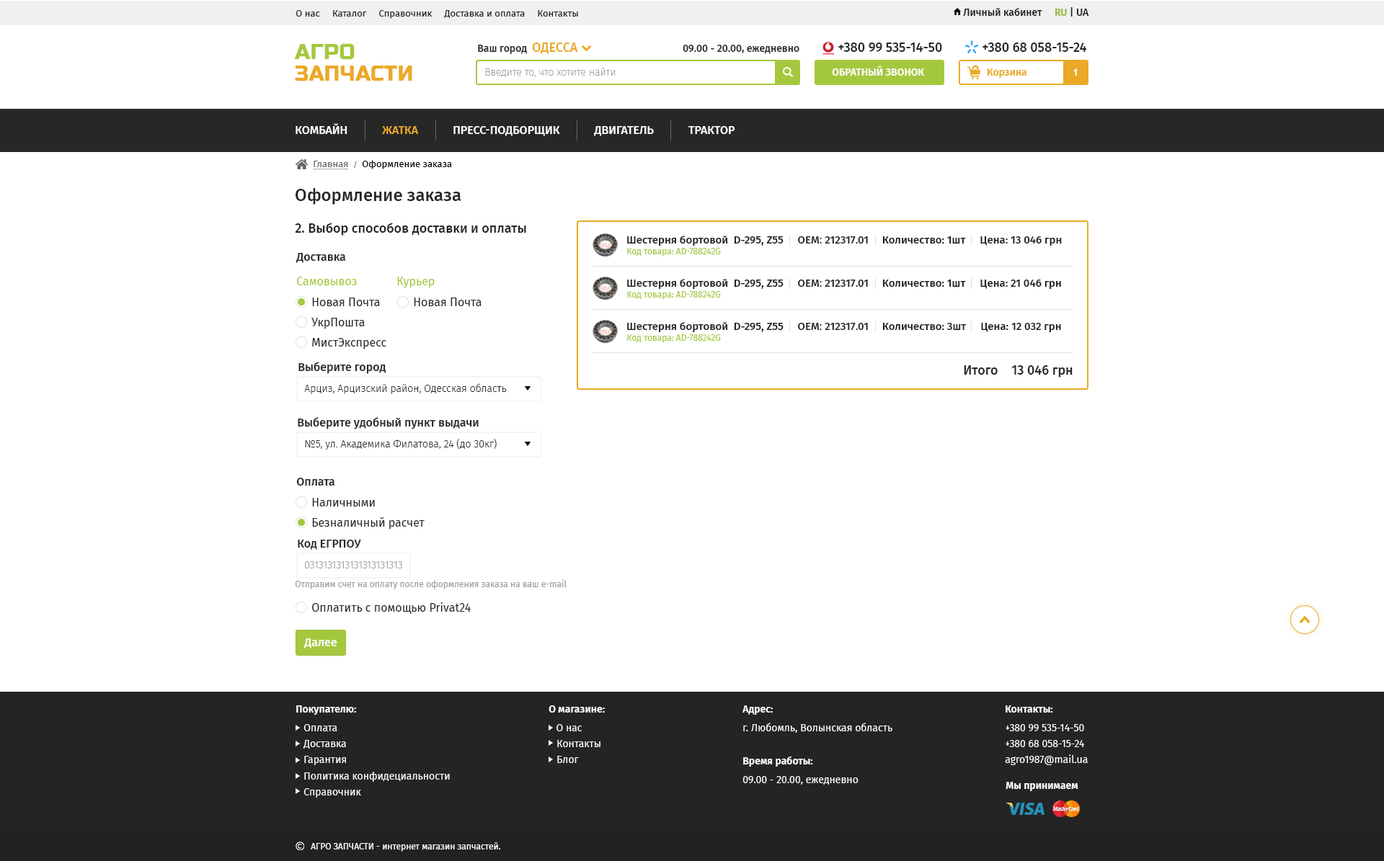
<style>
.page{position:relative;width:1384px;height:861px;background:#ffffff}
.page>*{position:absolute;margin:0}
.t1{font:9.4px "FiraSans-Regular";color:#212121}
.t2{font:10.1px "FiraSans-Medium";color:#212121}
.t3{font:10.1px "FiraSans-Medium";color:#91b627}
.t4{font:21.6px/21.6px "RussoOne-Regular";color:#eaa926;text-transform:uppercase}
.t5{font:21.6px/21.6px "RussoOne-Regular";color:#a4c83d;text-transform:uppercase}
.t6{font:10.1px "FiraSans-Medium";color:#272727}
.t7{font:13px "FiraSans-Medium";color:#eaa926}
.t8{font:13px "FiraSans-Medium";color:#272727}
.t9{font:10.1px "FiraSans-SemiBold";color:#ffffff;text-transform:uppercase}
.t10{font:10.1px "FiraSans-Thin";color:#777777}
.t11{font:10.1px "FiraSans-SemiBold";color:#eaa926}
.t12{font:10.1px "HelveticaNeueCyr-Bold";color:#ffffff}
.t13{font:11.5px "FiraSans-Medium";color:#ffffff;text-transform:uppercase}
.t14{font:11.5px "FiraSans-Medium";color:#eaa926;text-transform:uppercase}
.t15{font:9.4px "FiraSans-Regular";color:#000000}
.t16{font:9.4px "FiraSans-Regular";color:#676767;text-decoration:underline}
.t17{font:7.2px "FiraSans-Regular";color:#676767}
.t18{font:17.3px "FiraSans-Medium";color:#272727}
.t19{font:10.8px "FiraSans-Medium";color:#212121}
.t20{font:10.8px "FiraSans-Medium";color:#272727}
.t21{font:10.8px "FiraSans-Regular";color:#272727}
.t22{font:11.5px "FiraSans-Medium";color:#272727}
.t23{font:8.7px "FiraSans-Regular";color:#a4c83d}
.t24{font:11.5px "FiraSans-Regular";color:#a4c83d}
.t25{font:11.5px "FiraSans-Regular";color:#272727}
.t26{font:10.1px "FiraSans-Light";color:#272727}
.t27{font:10.1px "FiraSans-Light";color:#9e9e9e}
.t28{font:8.7px "FiraSans-Regular";color:#9e9e9e}
.t29{font:11.5px "FiraSans-Medium";color:#ffffff}
.t30{font:10.1px/15.9px "FiraSans-Regular";color:#ffffff}
.t31{font:10.1px/18.7px "FiraSans-SemiBold";color:#ffffff}
.t32{font:10.1px/18.7px "FiraSans-Regular";color:#ffffff}
.t33{font:10.1px "FiraSans-SemiBold";color:#ffffff}
.t34{font:8.7px "FiraSans-Regular";color:#ffffff}
</style>
<div class="page">
<p class="t1" style="left:296px;top:10px;width:282px;height:9px">О нас     Каталог     Справочник     Доставка и оплата     Контакты</p>
<p class="t2" style="left:963px;top:7px;width:126px;height:10px">Личный кабинет     <span class="t3">RU</span> | UA</p>
<p class="t4" style="left:294px;top:43px;width:118px;height:38px"><span class="t5">АГРО<br></span>ЗАПЧАСТИ</p>
<p class="t6" style="left:478px;top:43px;width:100px;height:11px">Ваш город  <span class="t7">ОДЕССА</span></p>
<p class="t6" style="left:683px;top:45px;width:116px;height:9px">09.00 - 20.00, ежедневно</p>
<p class="t8" style="left:838px;top:43px;width:104px;height:9px">+380 99 535-14-50</p>
<p class="t8" style="left:983px;top:43px;width:103px;height:9px">+380 68 058-15-24</p>
<p class="t9" style="left:832px;top:66px;width:93px;height:10px">Обратный звонок</p>
<p class="t10" style="left:485px;top:68px;width:131px;height:9px">Введите то, что хотите найти</p>
<p class="t11" style="left:987px;top:68px;width:40px;height:10px">Корзина</p>
<p class="t12" style="left:1073px;top:68px;width:4px;height:8px">1</p>
<p class="t13" style="left:296px;top:123px;width:439px;height:13px">КОМБАЙН            <span class="t14">ЖАТКА            </span>ПРЕСС-ПОДБОРЩИК            ДВИГАТЕЛЬ            трактор</p>
<p class="t15" style="left:313px;top:160px;width:139px;height:10px"><span class="t16">Главная  </span><span class="t17">/</span>  Оформление заказа</p>
<p class="t18" style="left:296px;top:188px;width:165px;height:17px">Оформление заказа</p>
<p class="t8" style="left:295px;top:223px;width:231px;height:13px">2. Выбор способов доставки и оплаты</p>
<p class="t19" style="left:627px;top:236px;width:435px;height:10px">Шестерня бортовой  D-295, Z55     <span class="t20">ОЕМ</span><span class="t21">: </span><span class="t20">212317.01     </span>Количество: 1шт     Цена: 13 046 грн</p>
<p class="t22" style="left:296px;top:253px;width:50px;height:10px">Доставка</p>
<p class="t23" style="left:627px;top:248px;width:94px;height:9px">Код товара: AD-788242G</p>
<p class="t24" style="left:297px;top:277px;width:60px;height:8px">Самовывоз</p>
<p class="t24" style="left:397px;top:277px;width:38px;height:11px">Курьер</p>
<p class="t19" style="left:627px;top:279px;width:434px;height:10px">Шестерня бортовой  D-295, Z55     <span class="t20">ОЕМ</span><span class="t21">: </span><span class="t20">212317.01     </span>Количество: 1шт     Цена: 21 046 грн</p>
<p class="t23" style="left:627px;top:291px;width:94px;height:9px">Код товара: AD-788242G</p>
<p class="t25" style="left:312px;top:298px;width:68px;height:8px">Новая Почта</p>
<p class="t25" style="left:414px;top:298px;width:68px;height:8px">Новая Почта</p>
<p class="t25" style="left:311px;top:318px;width:54px;height:11px">УкрПошта</p>
<p class="t19" style="left:627px;top:322px;width:434px;height:10px">Шестерня бортовой  D-295, Z55     <span class="t20">ОЕМ</span><span class="t21">: </span><span class="t20">212317.01     </span>Количество: 3шт     Цена: 12 032 грн</p>
<p class="t25" style="left:312px;top:338px;width:74px;height:12px">МистЭкспресс</p>
<p class="t23" style="left:627px;top:335px;width:94px;height:8px">Код товара: AD-788242G</p>
<p class="t22" style="left:298px;top:362px;width:88px;height:12px">Выберите город</p>
<p class="t8" style="left:964px;top:366px;width:34px;height:9px">Итого</p>
<p class="t8" style="left:1011px;top:366px;width:62px;height:12px">13 046 грн</p>
<p class="t26" style="left:304px;top:384px;width:203px;height:10px">Арциз, Арцизский район, Одесская область</p>
<p class="t22" style="left:298px;top:417px;width:181px;height:13px">Выберите удобный пункт выдачи</p>
<p class="t26" style="left:305px;top:439px;width:192px;height:11px">№5, ул. Академика Филатова, 24 (до 30кг)</p>
<p class="t22" style="left:296px;top:478px;width:39px;height:8px">Оплата</p>
<p class="t25" style="left:312px;top:498px;width:63px;height:9px">Наличными</p>
<p class="t25" style="left:312px;top:518px;width:113px;height:12px">Безналичный расчет</p>
<p class="t22" style="left:298px;top:540px;width:63px;height:10px">Код ЕГРПОУ</p>
<p class="t27" style="left:305px;top:562px;width:97px;height:7px">0313131313131313131313</p>
<p class="t28" style="left:295px;top:580px;width:272px;height:10px">Отправим счет на оплату после оформления заказа на ваш e-mail</p>
<p class="t25" style="left:312px;top:603px;width:159px;height:11px">Оплатить с помощью Privat24</p>
<p class="t29" style="left:304px;top:639px;width:33px;height:10px">Далее</p>
<p class="t30" style="left:296px;top:706px;width:154px;height:92px"><span class="t31">Покупателю:<br></span><span class="t32">   Оплата<br></span>   Доставка<br>   Гарантия<br>   Политика конфидециальности<br>   Справочник</p>
<p class="t30" style="left:549px;top:706px;width:56px;height:57px"><span class="t31">О магазине:<br>   </span><span class="t32">О нас<br></span>   Контакты<br>   Блог</p>
<p class="t32" style="left:743px;top:706px;width:149px;height:27px"><span class="t31">Адрес:<br></span>г. Любомль, Волынская область</p>
<p class="t30" style="left:1005px;top:706px;width:83px;height:60px"><span class="t31">Контакты:<br></span><span class="t32">+380 99 535-14-50<br></span>+380 68 058-15-24<br>agro1987@mail.ua</p>
<p class="t32" style="left:743px;top:756px;width:116px;height:29px"><span class="t31">Время работы:<br></span>09.00 - 20.00, ежедневно</p>
<p class="t33" style="left:1006px;top:782px;width:72px;height:10px">Мы принимаем</p>
<p class="t34" style="left:311px;top:843px;width:190px;height:9px">АГРО ЗАПЧАСТИ - интернет магазин запчастей.</p>
</div>
